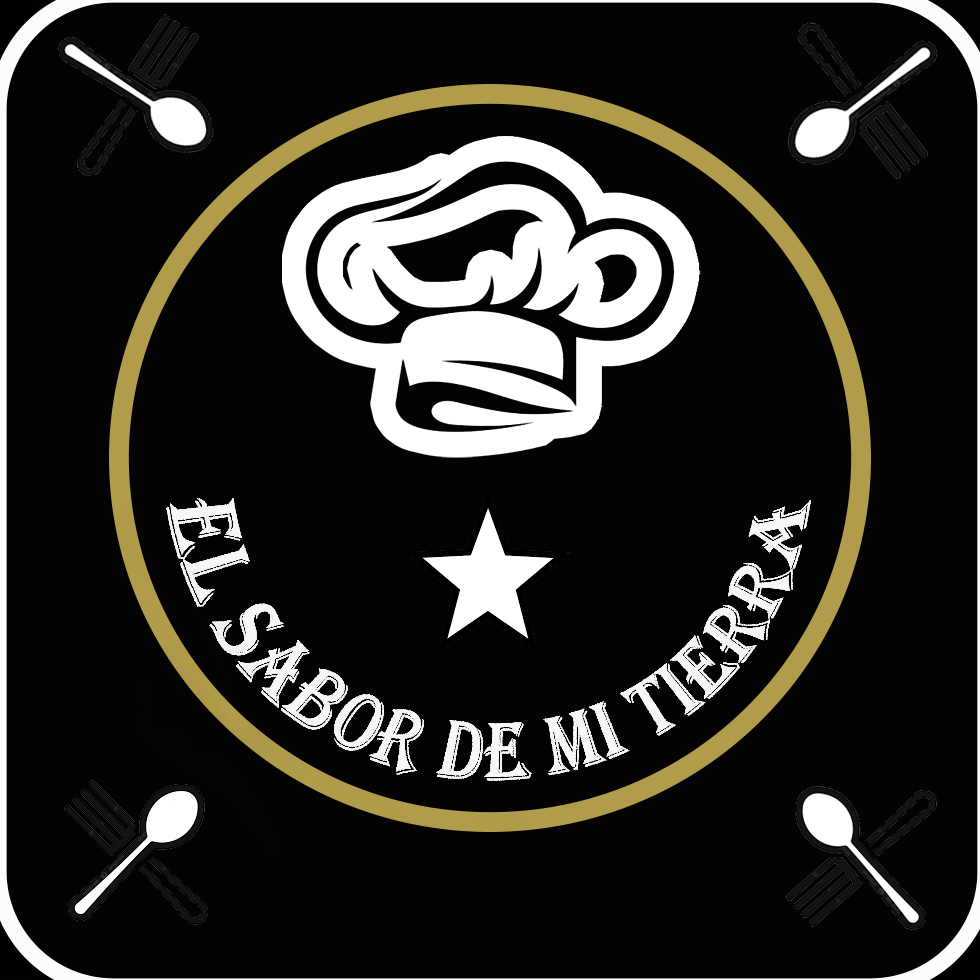
<style>
.page{position:relative;width:980px;height:980px;background:#030303}
.page>*{position:absolute;margin:0}
.t1{font:48px "Algerian";color:#f6f8f6}
</style>
<div class="page">
<p class="t1" style="left:166px;top:498px;width:645px;height:283px">El sabor de mi tierra</p>
</div>
